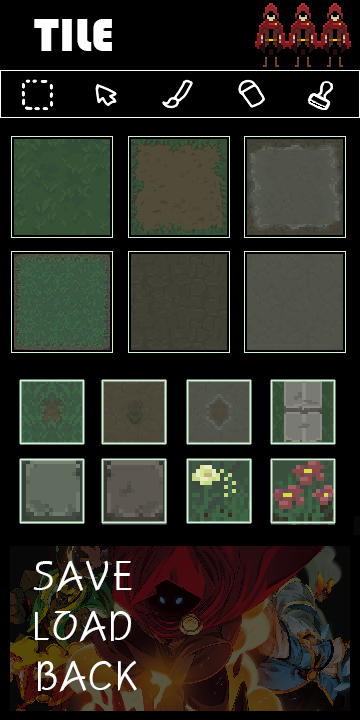
<style>
.page{position:relative;width:360px;height:720px;background:#000000}
.page>*{position:absolute;margin:0}
.t1{font:48px "Bauhaus93";color:#ffffff}
.t2{font:40px "H2porL";color:#ffffff}
</style>
<div class="page">
<p class="t1" style="left:34px;top:19px;width:78px;height:32px">TILE</p>
<p class="t2" style="left:33px;top:560px;width:99px;height:32px">SAVE</p>
<p class="t2" style="left:35px;top:610px;width:96px;height:32px">LOAD</p>
<p class="t2" style="left:38px;top:660px;width:99px;height:32px">BACK</p>
</div>
